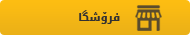
<style>
.page{position:relative;width:190px;height:35px}
.page>*{position:absolute;margin:0}
.t1{font:11px "DroidArabicKufi-Bold";color:#333132}
</style>
<div class="page">
<p class="t1" style="left:79px;top:10px;width:41px;height:14px">فرۆشگا</p>
</div>
